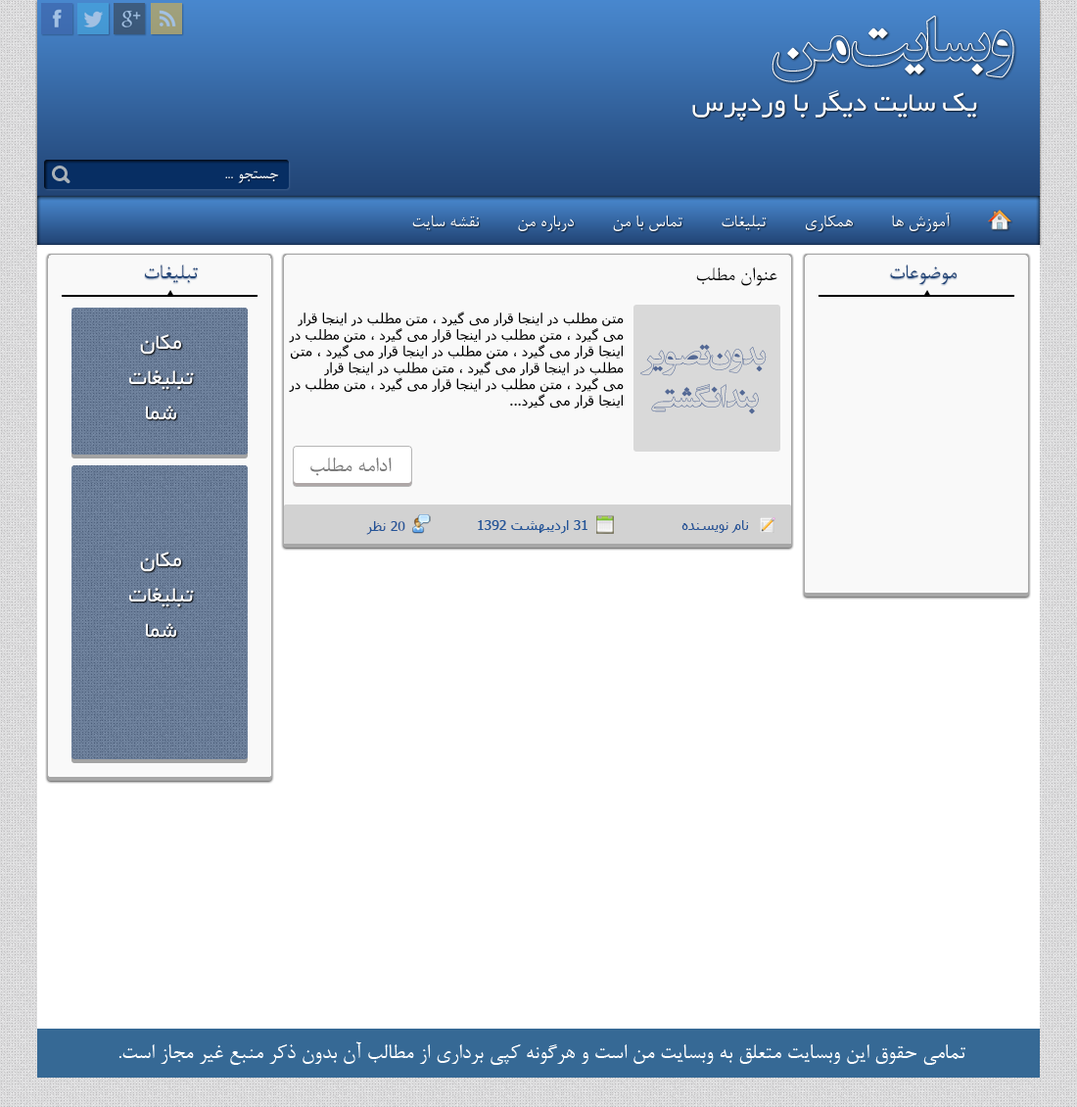
<style>
.page{position:relative;width:1077px;height:1107px;background:#ffffff}
.page>*{position:absolute;margin:0}
.t1{font:70.5px "EntezareZohoor3";color:#ffffff}
.t2{font:29.4px "BYekan";color:#ffffff}
.t3{font:17.6px "BNazanin";color:#ffffff}
.t4{font:19.6px "BNazanin";color:#ffffff}
.t5{font:23.5px "BNazanin";color:#234678}
.t6{font:21.5px "BNazanin";color:#000000}
.t7{font:13.7px "Tahoma";color:#000000}
.t8{font:23.5px/35.3px "BYekan";color:#ffffff}
.t9{font:35.3px "EntezareZohoor3";color:#546995}
.t10{font:23.5px "BNazanin";color:#7b7b7b}
.t11{font:13.7px "Tahoma";color:#255497}
.t12{font:23.5px "BNazanin";color:#ffffff}
</style>
<div class="page">
<p class="t1" style="left:772px;top:16px;width:243px;height:66px">وبسایت من</p>
<p class="t2" style="left:692px;top:90px;width:285px;height:30px">یک سایت دیگر با وردپرس</p>
<p class="t3" style="left:225px;top:170px;width:54px;height:13px">جستجو ...</p>
<p class="t4" style="left:412px;top:213px;width:538px;height:18px">آموزش ها        همکاری        تبلیغات        تماس با من        درباره من        نقشه سایت</p>
<p class="t5" style="left:145px;top:264px;width:53px;height:19px">تبلیغات</p>
<p class="t6" style="left:696px;top:266px;width:82px;height:20px">عنوان مطلب</p>
<p class="t5" style="left:890px;top:264px;width:67px;height:20px">موضوعات</p>
<p class="t7" style="left:289px;top:311px;width:335px;height:97px">متن مطلب در اینجا قرار می گیرد ، متن مطلب در اینجا قرار<br>می گیرد ، متن مطلب در اینجا قرار می گیرد ، متن مطلب در<br>اینجا قرار می گیرد ، متن مطلب در اینجا قرار می گیرد ، متن <br>مطلب در اینجا قرار می گیرد ، متن مطلب در اینجا قرار<br>می گیرد ، متن مطلب در اینجا قرار می گیرد ، متن مطلب در<br>اینجا قرار می گیرد...</p>
<p class="t8" style="left:129px;top:334px;width:65px;height:86px;text-align:center">مکان<br>تبلیغات<br>شما</p>
<p class="t9" style="left:641px;top:344px;width:126px;height:70px;text-align:center">بدون تصویر<br>بند انگشتی</p>
<p class="t10" style="left:310px;top:456px;width:82px;height:20px">ادامه مطلب</p>
<p class="t11" style="left:366px;top:521px;width:39px;height:14px">20 نظر</p>
<p class="t11" style="left:478px;top:520px;width:110px;height:14px">31 اردیبهشت 1392</p>
<p class="t11" style="left:682px;top:520px;width:66px;height:13px">نام نویسنده</p>
<p class="t8" style="left:129px;top:551px;width:65px;height:87px;text-align:center">مکان<br>تبلیغات<br>شما</p>
<p class="t12" style="left:119px;top:1041px;width:847px;height:24px">تمامی حقوق این وبسایت متعلق به وبسایت من است و هرگونه کپی برداری از مطالب آن بدون ذکر منبع غیر مجاز است.</p>
</div>
